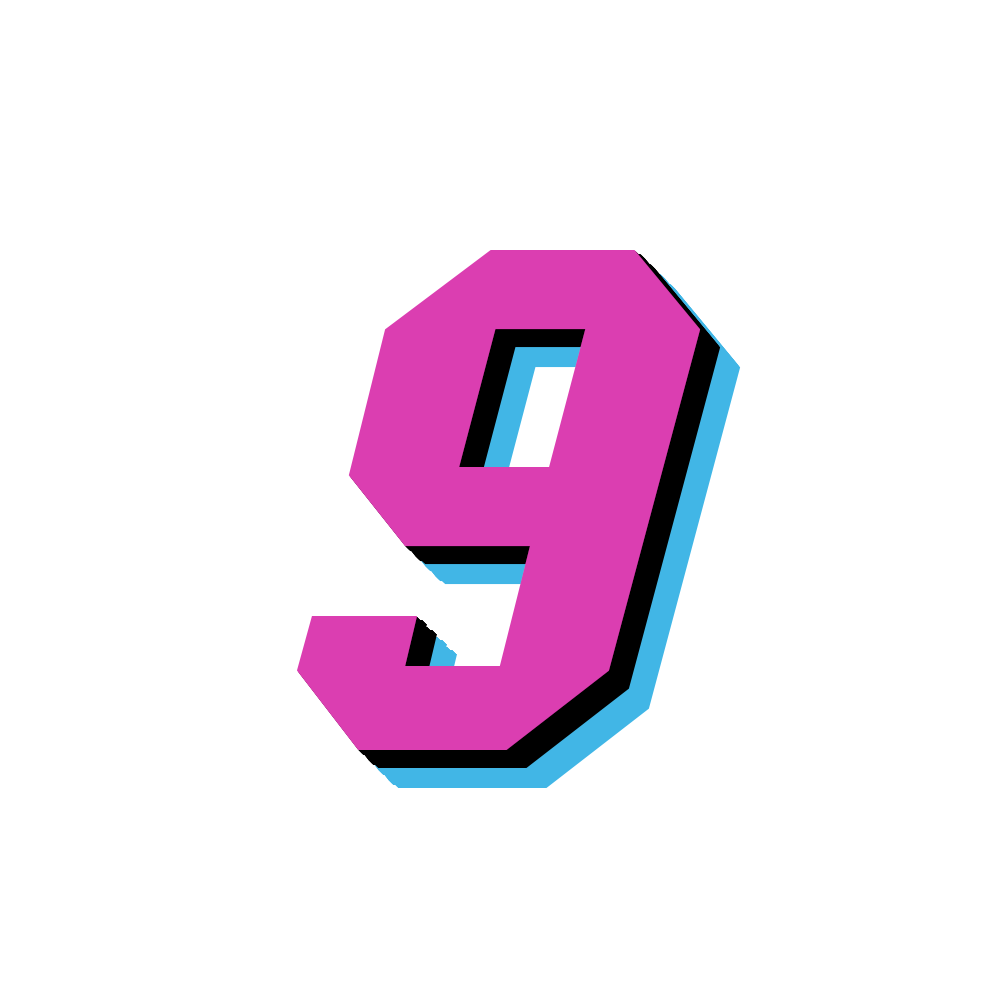
<style>
.page{position:relative;width:1000px;height:1000px;background:#ffffff}
.page>*{position:absolute;margin:0}
.t1{font:625px "NBAHeat";color:#db3eb1}
</style>
<div class="page">
<p class="t1" style="left:297px;top:250px;width:404px;height:500px">9</p>
</div>
